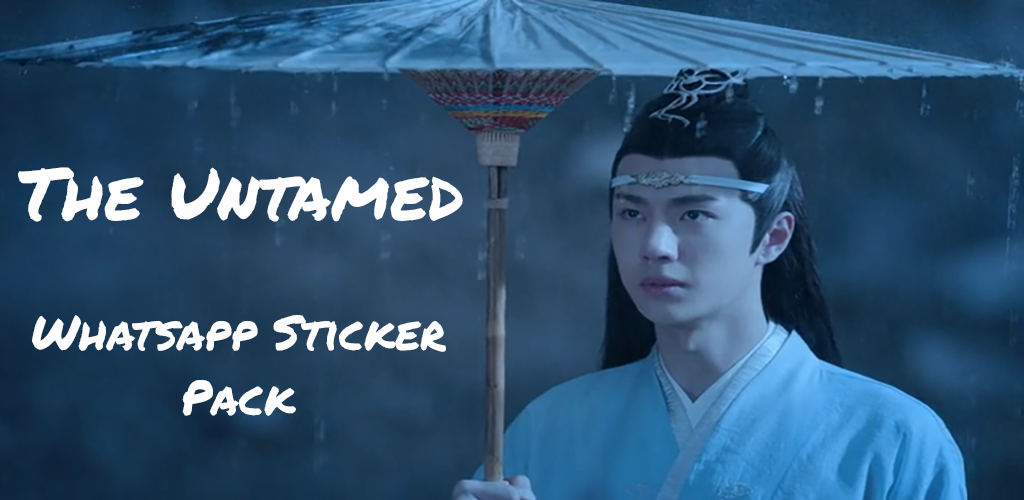
<style>
.page{position:relative;width:1024px;height:500px}
.page>*{position:absolute;margin:0}
.t1{font:72px "PermanentMarker";color:#fefefe}
.t2{font:48px "PermanentMarker";color:#fefefe}
</style>
<div class="page">
<p class="t1" style="left:18px;top:167px;width:445px;height:55px">The Untamed</p>
<p class="t2" style="left:32px;top:315px;width:414px;height:37px">Whatsapp Sticker</p>
<p class="t2" style="left:182px;top:379px;width:114px;height:37px">Pack</p>
</div>
